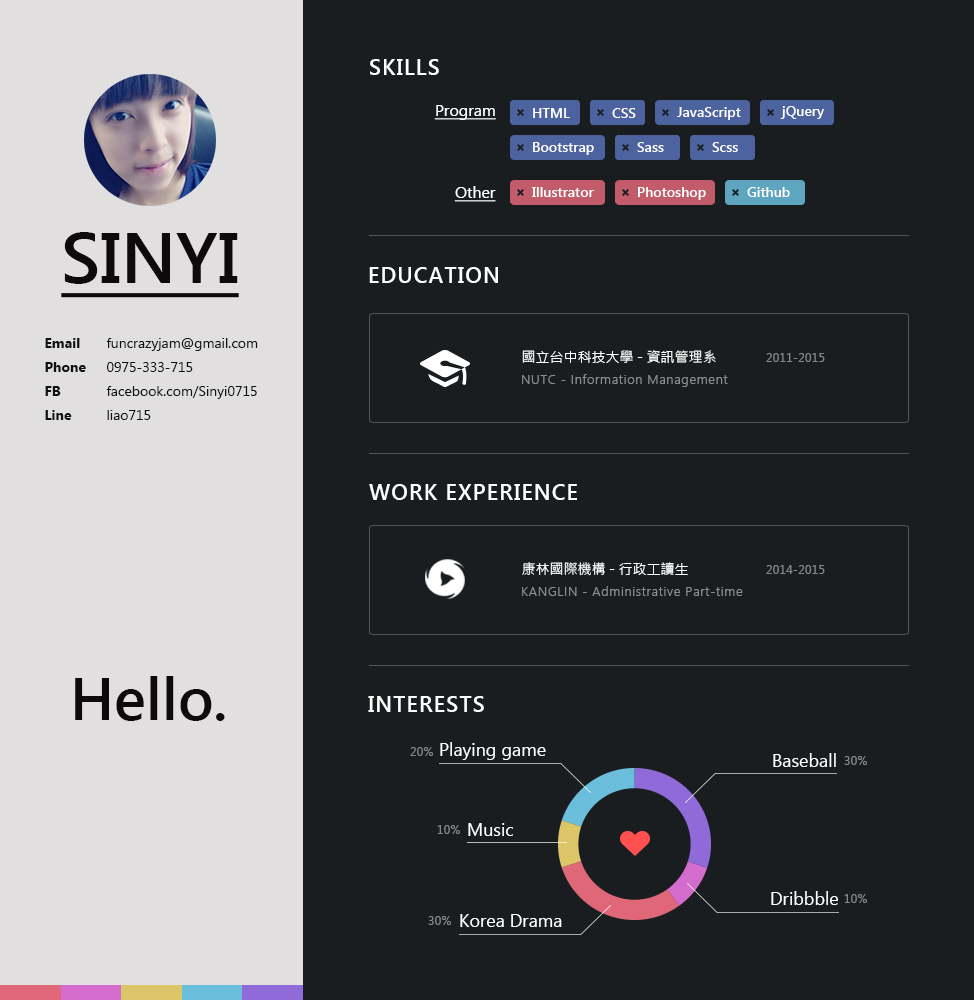
<style>
.page{position:relative;width:974px;height:1000px;background:#191d20}
.page>*{position:absolute;margin:0}
.t1{font:22px "SegoeUI-SemiBold";letter-spacing:0.05em;color:#ffffff}
.t2{font:16px "SegoeUI";color:#ffffff;text-decoration:underline}
.t3{font:14px "SegoeUI-SemiBold";color:#ffffff}
.t4{font:72px "SegoeUI-SemiBold";color:#0e0a0b;text-decoration:underline}
.t5{font:14px/24px "SegoeUI-Bold";color:#0d1114}
.t6{font:14px/24px "SegoeUI";color:#0d1114}
.t7{font:14px "MicrosoftJhengHeiRegular";color:#fefefe}
.t8{font:12px "SegoeUI";letter-spacing:0.025em;color:#888787}
.t9{font:13px "SegoeUI-Semilight";letter-spacing:0.05em;color:#8e8e8e}
.t10{font:60px "SegoeUI-SemiBold";color:#0e0a0b}
.t11{font:18px "SegoeUI";color:#ffffff}
</style>
<div class="page">
<p class="t1" style="left:370px;top:59px;width:69px;height:16px">SKILLS</p>
<p class="t2" style="left:434px;top:105px;width:62px;height:15px">Program</p>
<p class="t3" style="left:533px;top:108px;width:37px;height:10px">HTML</p>
<p class="t3" style="left:612px;top:108px;width:24px;height:10px">CSS</p>
<p class="t3" style="left:677px;top:107px;width:64px;height:13px">JavaScript</p>
<p class="t3" style="left:780px;top:106px;width:44px;height:13px">jQuery</p>
<p class="t3" style="left:533px;top:142px;width:61px;height:13px">Bootstrap</p>
<p class="t3" style="left:637px;top:142px;width:27px;height:10px">Sass</p>
<p class="t3" style="left:712px;top:142px;width:26px;height:10px">Scss</p>
<p class="t2" style="left:454px;top:186px;width:42px;height:16px">Other</p>
<p class="t3" style="left:532px;top:187px;width:62px;height:10px">Illustrator</p>
<p class="t3" style="left:638px;top:187px;width:68px;height:13px">Photoshop</p>
<p class="t3" style="left:747px;top:187px;width:43px;height:10px">Github</p>
<p class="t4" style="left:61px;top:232px;width:178px;height:66px">SINYI</p>
<p class="t1" style="left:369px;top:267px;width:129px;height:16px">EDUCATION</p>
<p class="t5" style="left:45px;top:338px;width:41px;height:82px">Email<br>Phone<br>FB<br>Line</p>
<p class="t6" style="left:106px;top:338px;width:152px;height:82px">funcrazyjam@gmail.com<br>0975-333-715<br>facebook.com/Sinyi0715<br>liao715</p>
<p class="t7" style="left:522px;top:350px;width:194px;height:13px">國立台中科技大學 - 資訊管理系</p>
<p class="t8" style="left:766px;top:353px;width:59px;height:9px">2011-2015</p>
<p class="t9" style="left:522px;top:374px;width:206px;height:13px">NUTC - Information Management</p>
<p class="t1" style="left:369px;top:484px;width:208px;height:16px">WORK EXPERIENCE</p>
<p class="t7" style="left:522px;top:562px;width:166px;height:14px">康林國際機構 - 行政工讀生</p>
<p class="t8" style="left:766px;top:565px;width:59px;height:9px">2014-2015</p>
<p class="t9" style="left:522px;top:586px;width:221px;height:10px">KANGLIN - Administrative Part-time</p>
<p class="t10" style="left:75px;top:676px;width:150px;height:45px">Hello.</p>
<p class="t1" style="left:368px;top:696px;width:116px;height:16px">INTERESTS</p>
<p class="t8" style="left:410px;top:747px;width:23px;height:9px">20%</p>
<p class="t11" style="left:440px;top:742px;width:106px;height:18px">Playing game</p>
<p class="t11" style="left:773px;top:753px;width:63px;height:14px">Baseball</p>
<p class="t8" style="left:844px;top:756px;width:23px;height:9px">30%</p>
<p class="t8" style="left:437px;top:825px;width:23px;height:9px">10%</p>
<p class="t11" style="left:468px;top:823px;width:45px;height:13px">Music</p>
<p class="t11" style="left:771px;top:891px;width:67px;height:14px">Dribbble</p>
<p class="t8" style="left:844px;top:894px;width:23px;height:9px">10%</p>
<p class="t8" style="left:428px;top:916px;width:23px;height:9px">30%</p>
<p class="t11" style="left:460px;top:914px;width:102px;height:13px">Korea Drama</p>
</div>
